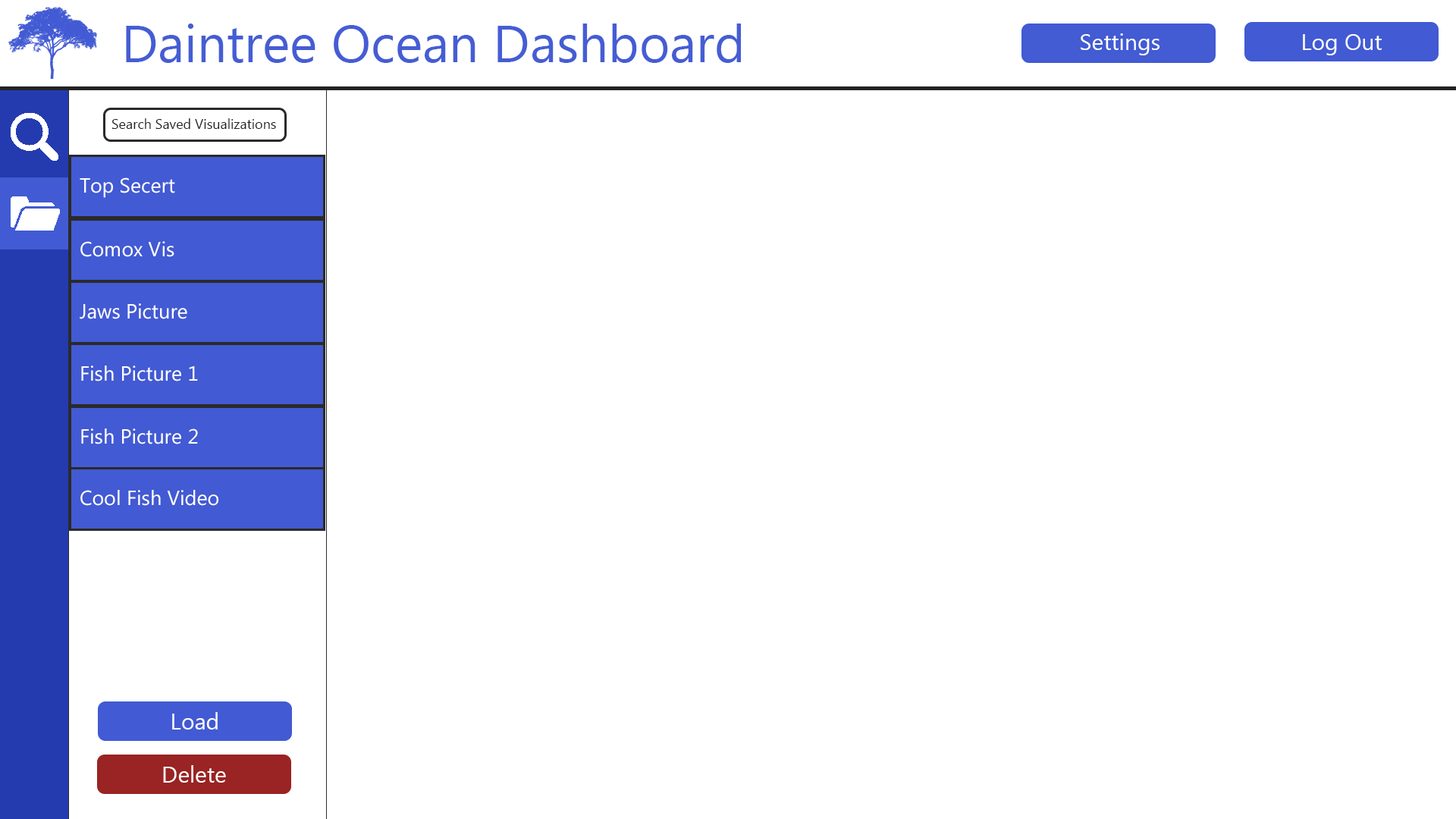
<style>
.page{position:relative;width:1456px;height:819px;background:#ffffff}
.page>*{position:absolute;margin:0}
.t1{font:52.3px "MyanmarText";color:#455dd4}
.t2{font:22.7px "MyanmarText";color:#ffffff}
.t3{font:13.6px "MyanmarText";color:#232323}
.t4{font:20.5px "MyanmarText";color:#ffffff}
</style>
<div class="page">
<p class="t1" style="left:126px;top:24px;width:615px;height:39px">Daintree Ocean Dashboard</p>
<p class="t2" style="left:1081px;top:33px;width:78px;height:22px">Settings</p>
<p class="t2" style="left:1303px;top:34px;width:79px;height:21px">Log Out</p>
<p class="t3" style="left:111px;top:118px;width:165px;height:11px">Search Saved Visualizations</p>
<p class="t4" style="left:80px;top:177px;width:95px;height:21px">Top Secert</p>
<p class="t4" style="left:80px;top:241px;width:94px;height:16px">Comox Vis</p>
<p class="t4" style="left:80px;top:303px;width:107px;height:16px">Jaws Picture</p>
<p class="t4" style="left:81px;top:366px;width:117px;height:15px">Fish Picture 1</p>
<p class="t4" style="left:81px;top:428px;width:117px;height:16px">Fish Picture 2</p>
<p class="t4" style="left:80px;top:490px;width:138px;height:16px">Cool Fish Video</p>
<p class="t2" style="left:172px;top:712px;width:46px;height:18px">Load</p>
<p class="t2" style="left:163px;top:765px;width:63px;height:18px">Delete</p>
</div>
